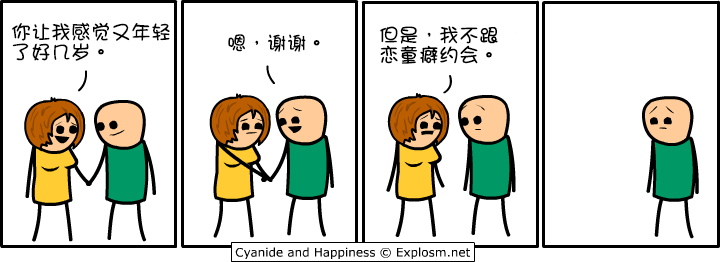
<style>
.page{position:relative;width:721px;height:262px;background:#ffffff}
.page>*{position:absolute;margin:0}
.t1{font:20px/20px "DFGirl";color:#000000}
.t2{font:20px "DFGirl";color:#000000}
</style>
<div class="page">
<p class="t1" style="left:11px;top:22px;width:159px;height:39px">你让我感觉又年轻<br>了好几岁。</p>
<p class="t1" style="left:380px;top:26px;width:118px;height:38px">但是，我不跟<br>恋童癖约会。</p>
<p class="t2" style="left:228px;top:34px;width:92px;height:18px">嗯，谢谢。</p>
</div>
